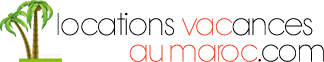
<style>
.page{position:relative;width:324px;height:62px;background:#ffffff}
.page>*{position:absolute;margin:0}
.t1{font:22px "BondoluoPeek";color:#000000}
.t2{font:22px "BondoluoPeek";color:#f24024}
</style>
<div class="page">
<p class="t1" style="left:57px;top:12px;width:267px;height:50px">locations <span class="t2">vac</span>ances<br>  <span class="t2">au maroc</span>.com</p>
</div>
